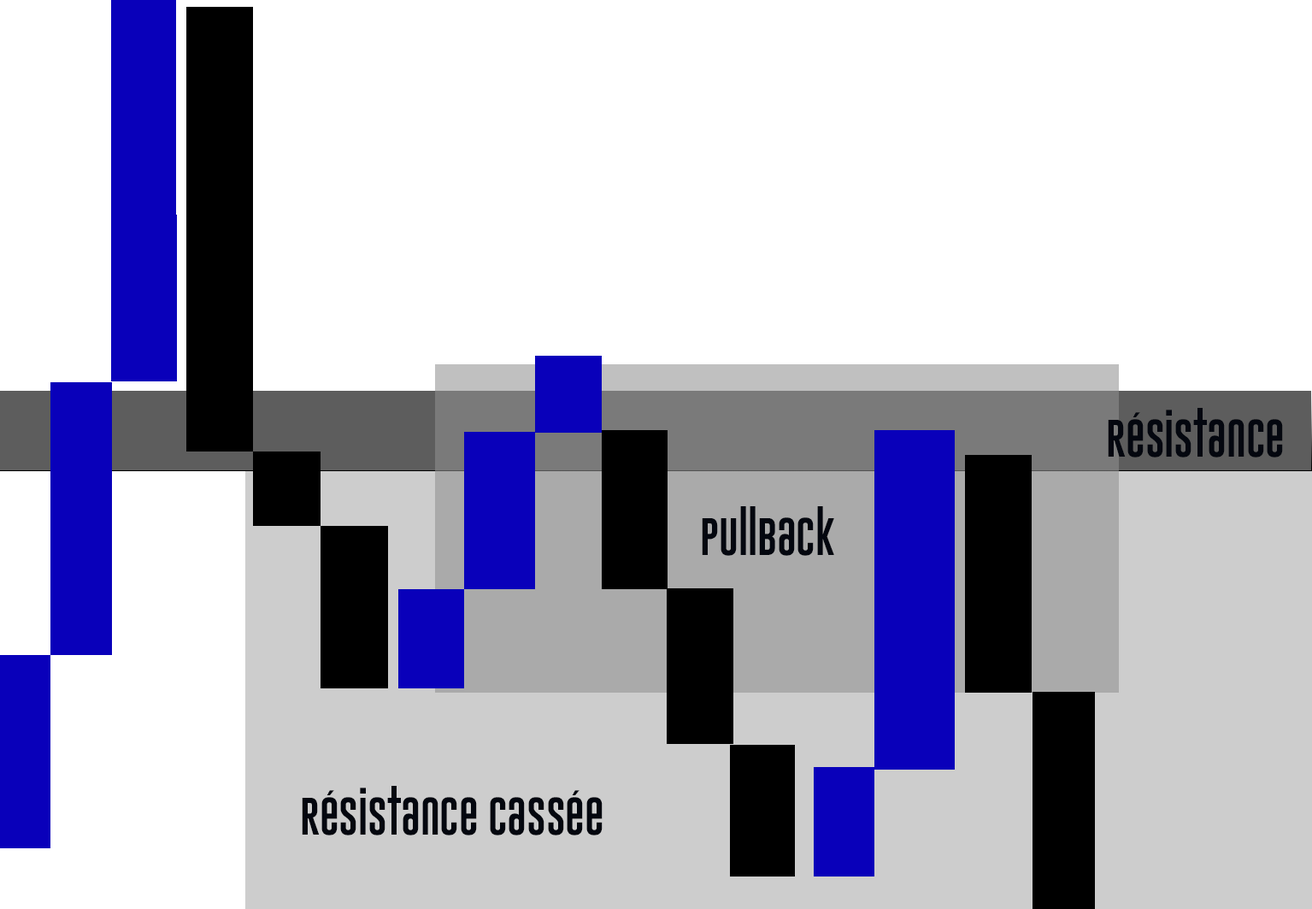
<style>
.page{position:relative;width:1312px;height:909px;background:#ffffff}
.page>*{position:absolute;margin:0}
.t1{font:38.4px "GoboldUplow";color:#04070f}
</style>
<div class="page">
<p class="t1" style="left:1108px;top:408px;width:175px;height:49px">Résistance</p>
<p class="t1" style="left:702px;top:506px;width:132px;height:50px">PullBack</p>
<p class="t1" style="left:302px;top:786px;width:301px;height:49px">Résistance cassée</p>
</div>
